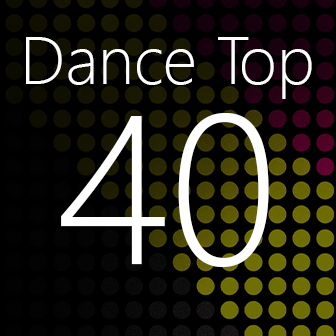
<style>
.page{position:relative;width:336px;height:336px;background:#000000}
.page>*{position:absolute;margin:0}
.t1{font:67px/97.5px "SegoeUI-Light";color:#ffffff}
.t2{font:212px/179.5px "SegoeUI-Light";color:#ffffff}
</style>
<div class="page">
<p class="t1" style="left:26px;top:37px;width:286px;height:230px;text-align:center">Dance Top<br><span class="t2">40</span></p>
</div>
